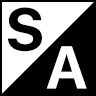
<style>
.page{position:relative;width:96px;height:96px;background:#000000}
.page>*{position:absolute;margin:0}
.t1{font:60px "SFProDisplay-Bold";letter-spacing:0.09em;color:#000000;text-transform:uppercase}
.t2{font:60px "SFProDisplay-Bold";letter-spacing:0.09em;color:#ffffff;text-transform:uppercase}
</style>
<div class="page">
<p class="t1" style="left:8px;top:7px;width:34px;height:45px">S</p>
<p class="t2" style="left:46px;top:46px;width:41px;height:43px">A</p>
</div>
